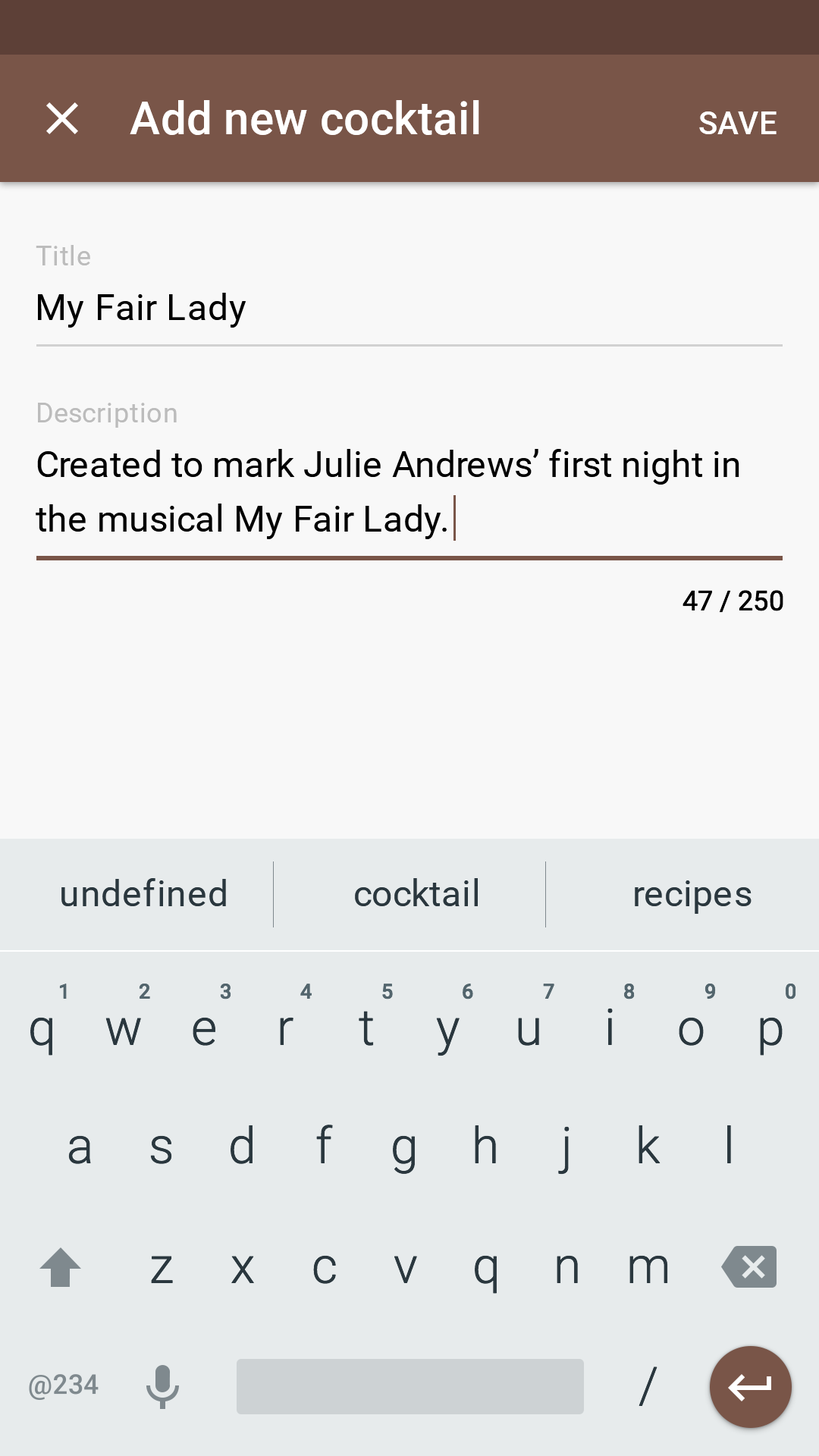
<style>
.page{position:relative;width:819px;height:1456px;background:#f8f8f8}
.page>*{position:absolute;margin:0}
.t1{font:45.5px "Roboto-Medium";letter-spacing:0.005em;color:#ffffff}
.t2{font:31.8px "Roboto-Medium";letter-spacing:0.01em;color:#ffffff;text-transform:uppercase}
.t3{font:27.3px "Roboto-Regular";letter-spacing:0.02em;color:#bcbcbc}
.t4{font:36.4px "Roboto-Regular";letter-spacing:0.01em;color:#000000}
.t5{font:36.4px/54.6px "Roboto-Regular";color:#000000}
.t6{font:27.3px "Roboto-Regular";color:#000000}
.t7{font:36.4px "Roboto-Regular";letter-spacing:0.01em;color:#2a373e}
.t8{font:20.5px "Roboto-Medium";color:#53656d}
.t9{font:50px "Roboto-Light";color:#2a373e}
</style>
<div class="page">
<p class="t1" style="left:130px;top:100px;width:349px;height:35px">Add new cocktail</p>
<p class="t2" style="left:699px;top:111px;width:78px;height:23px">Save</p>
<p class="t3" style="left:36px;top:245px;width:54px;height:20px">Title</p>
<p class="t4" style="left:38px;top:293px;width:208px;height:35px">My Fair Lady</p>
<p class="t3" style="left:38px;top:403px;width:139px;height:25px">Description</p>
<p class="t5" style="left:36px;top:449px;width:703px;height:90px">Created to mark Julie Andrews’ first night in the musical My Fair Lady.</p>
<p class="t6" style="left:682px;top:590px;width:101px;height:23px">47 / 250</p>
<p class="t7" style="left:61px;top:878px;width:165px;height:28px">undefined</p>
<p class="t7" style="left:355px;top:878px;width:123px;height:28px">cocktail</p>
<p class="t7" style="left:635px;top:880px;width:116px;height:34px">recipes</p>
<p class="t8" style="left:59px;top:984px;width:8px;height:15px">1</p>
<p class="t8" style="left:139px;top:984px;width:11px;height:15px">2</p>
<p class="t8" style="left:220px;top:984px;width:11px;height:15px">3</p>
<p class="t8" style="left:300px;top:984px;width:12px;height:15px">4</p>
<p class="t8" style="left:382px;top:984px;width:11px;height:15px">5</p>
<p class="t8" style="left:463px;top:984px;width:10px;height:15px">6</p>
<p class="t8" style="left:543px;top:984px;width:11px;height:15px">7</p>
<p class="t8" style="left:624px;top:984px;width:11px;height:15px">8</p>
<p class="t8" style="left:704px;top:984px;width:12px;height:15px">9</p>
<p class="t8" style="left:786px;top:984px;width:10px;height:15px">0</p>
<p class="t9" style="left:359px;top:1011px;width:15px;height:35px">t</p>
<p class="t9" style="left:607px;top:1008px;width:6px;height:37px">i</p>
<p class="t9" style="left:30px;top:1017px;width:22px;height:39px">q</p>
<p class="t9" style="left:105px;top:1018px;width:36px;height:27px">w</p>
<p class="t9" style="left:193px;top:1017px;width:22px;height:29px">e</p>
<p class="t9" style="left:280px;top:1017px;width:13px;height:28px">r</p>
<p class="t9" style="left:436px;top:1018px;width:24px;height:38px">y</p>
<p class="t9" style="left:518px;top:1018px;width:21px;height:28px">u</p>
<p class="t9" style="left:679px;top:1017px;width:25px;height:29px">o</p>
<p class="t9" style="left:760px;top:1017px;width:23px;height:39px">p</p>
<p class="t9" style="left:231px;top:1125px;width:22px;height:39px">d</p>
<p class="t9" style="left:316px;top:1125px;width:17px;height:38px">f</p>
<p class="t9" style="left:475px;top:1125px;width:21px;height:38px">h</p>
<p class="t9" style="left:558px;top:1126px;width:12px;height:49px">j</p>
<p class="t9" style="left:639px;top:1125px;width:21px;height:38px">k</p>
<p class="t9" style="left:727px;top:1125px;width:4px;height:38px">l</p>
<p class="t9" style="left:68px;top:1135px;width:23px;height:29px">a</p>
<p class="t9" style="left:150px;top:1135px;width:22px;height:29px">s</p>
<p class="t9" style="left:393px;top:1135px;width:22px;height:39px">g</p>
<p class="t9" style="left:151px;top:1256px;width:22px;height:27px">z</p>
<p class="t9" style="left:231px;top:1256px;width:23px;height:27px">x</p>
<p class="t9" style="left:313px;top:1255px;width:23px;height:29px">c</p>
<p class="t9" style="left:394px;top:1256px;width:23px;height:27px">v</p>
<p class="t9" style="left:475px;top:1255px;width:22px;height:39px">q</p>
<p class="t9" style="left:557px;top:1255px;width:21px;height:28px">n</p>
<p class="t9" style="left:629px;top:1255px;width:39px;height:28px">m</p>
<p class="t9" style="left:639px;top:1366px;width:18px;height:40px">/</p>
</div>
